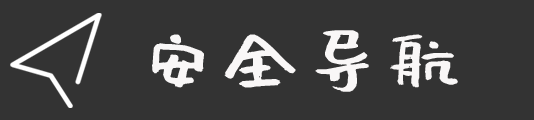
<style>
.page{position:relative;width:534px;height:120px;background:#333333}
.page>*{position:absolute;margin:0}
.t1{font:70px "MuYaoSoftbrush";color:#f9f6f6;scale:1.17 1}
</style>
<div class="page">
<p class="t1" style="left:152px;top:30px;width:306px;height:62px">安全导航</p>
</div>
